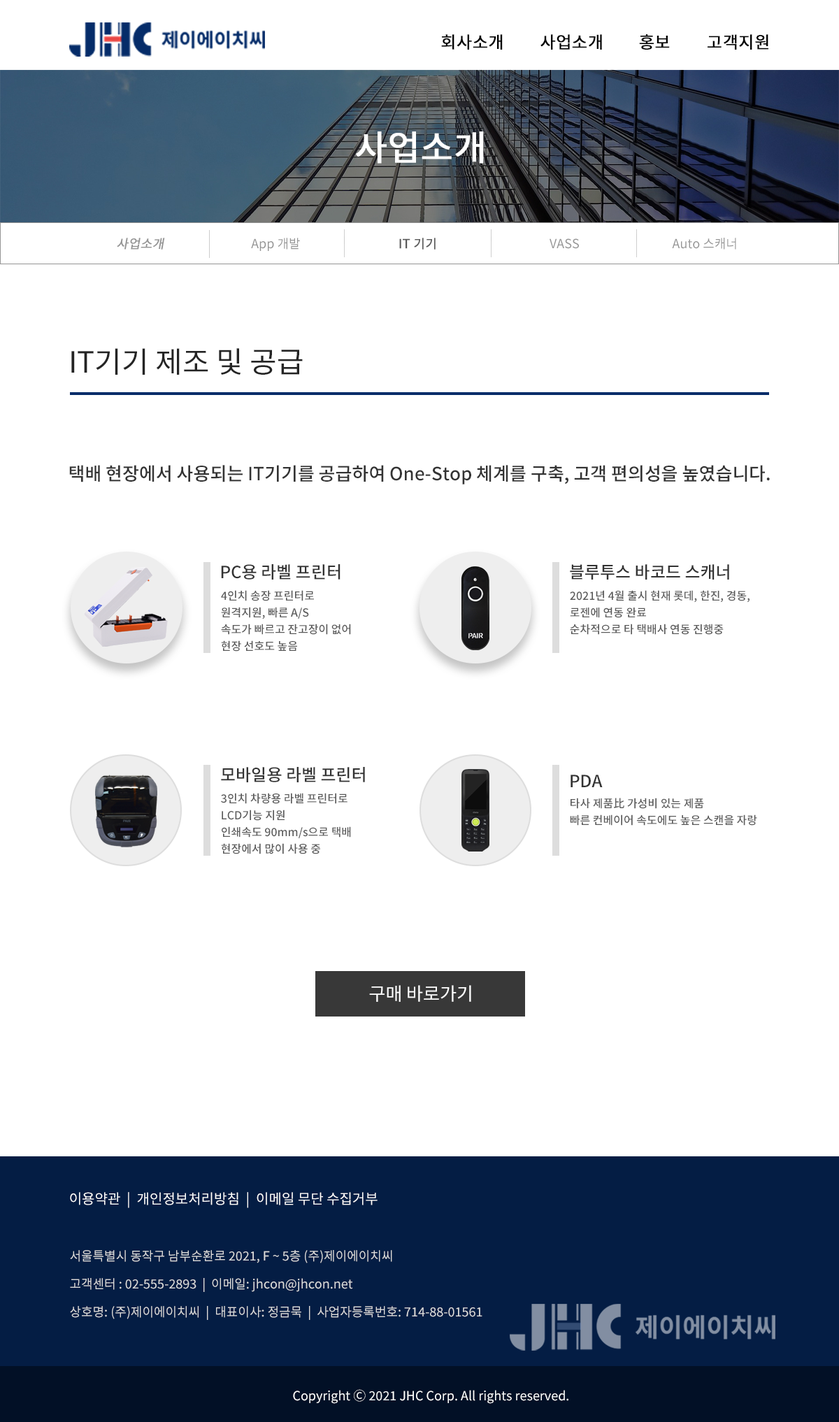
<style>
.page{position:relative;width:839px;height:1422px;background:#ffffff}
.page>*{position:absolute;margin:0}
.t1{font:16.8px "NotoSansKR-Regular";color:#000000;font-weight:bold}
.t2{font:34.9px "NotoSansKR-Regular";color:#ffffff;font-weight:bold}
.t3{font:12.6px "NotoSansKR-Regular";color:#959595;font-weight:bold;font-style:italic}
.t4{font:12.6px "NotoSansKR-Regular";color:#959595}
.t5{font:12.6px "NotoSansKR-Regular";color:#595959;font-weight:bold}
.t6{font:29.4px "NotoSansKR-Regular";color:#242424}
.t7{font:18.2px "NotoSansKR-Medium";color:#333333}
.t8{font:16.8px "NotoSansKR-Medium";color:#333333}
.t9{font:11.2px/16.8px "NotoSansKR-Medium";color:#595959}
.t10{font:18.2px "NotoSansKR-Regular";color:#ffffff}
.t11{font:14px "NotoSansKR-Regular";color:#ffffff}
.t12{font:12.6px/28px "NotoSansKR-Regular";color:#dddddd}
.t13{font:12.6px "NotoSansKR-Regular";color:#ffffff}
</style>
<div class="page">
<p class="t1" style="left:441px;top:34px;width:62px;height:16px">회사소개</p>
<p class="t1" style="left:540px;top:34px;width:62px;height:16px">사업소개</p>
<p class="t1" style="left:639px;top:34px;width:31px;height:16px">홍보</p>
<p class="t1" style="left:707px;top:34px;width:61px;height:16px">고객지원</p>
<p class="t2" style="left:356px;top:131px;width:128px;height:33px">사업소개</p>
<p class="t3" style="left:117px;top:238px;width:48px;height:12px">사업소개</p>
<p class="t4" style="left:251px;top:238px;width:49px;height:13px">App 개발</p>
<p class="t5" style="left:399px;top:238px;width:36px;height:12px">IT 기기</p>
<p class="t4" style="left:549px;top:238px;width:30px;height:11px">VASS</p>
<p class="t4" style="left:672px;top:238px;width:64px;height:12px">Auto 스캐너</p>
<p class="t6" style="left:71px;top:348px;width:232px;height:27px">IT기기 제조 및 공급</p>
<p class="t7" style="left:69px;top:465px;width:701px;height:19px">택배 현장에서 사용되는 IT기기를 공급하여 One-Stop 체계를 구축, 고객 편의성을 높였습니다.</p>
<p class="t8" style="left:221px;top:564px;width:119px;height:15px">PC용 라벨 프린터</p>
<p class="t8" style="left:570px;top:564px;width:159px;height:15px">블루투스 바코드 스캐너</p>
<p class="t9" style="left:221px;top:590px;width:130px;height:61px">4인치 송장 프린터로 <br>원격지원, 빠른 A/S<br>속도가 빠르고 잔고장이 없어 <br>현장 선호도 높음</p>
<p class="t9" style="left:570px;top:590px;width:179px;height:45px">2021년 4월 출시 현재 롯데, 한진, 경동, <br>로젠에 연동 완료 <br>순차적으로 타 택배사 연동 진행중</p>
<p class="t8" style="left:221px;top:767px;width:144px;height:15px">모바일용 라벨 프린터</p>
<p class="t8" style="left:570px;top:774px;width:33px;height:13px">PDA</p>
<p class="t9" style="left:221px;top:793px;width:130px;height:61px">3인치 차량용 라벨 프린터로<br>LCD기능 지원<br>인쇄속도 90mm/s으로 택배<br>현장에서 많이 사용 중</p>
<p class="t9" style="left:570px;top:798px;width:187px;height:27px">타사 제품比 가성비 있는 제품<br>빠른 컨베이어 속도에도 높은 스캔을 자랑</p>
<p class="t10" style="left:369px;top:985px;width:102px;height:17px">구매 바로가기</p>
<p class="t11" style="left:70px;top:1192px;width:307px;height:16px">이용약관  |  개인정보처리방침  |  이메일 무단 수집거부</p>
<p class="t12" style="left:70px;top:1250px;width:412px;height:70px">서울특별시 동작구 남부순환로 2021, F ~ 5층 (주)제이에이치씨<br>고객센터 : 02-555-2893  |  이메일: jhcon@jhcon.net<br>상호명: (주)제이에이치씨  |  대표이사: 정금묵  |  사업자등록번호: 714-88-01561</p>
<p class="t13" style="left:293px;top:1389px;width:275px;height:15px">Copyright Ⓒ 2021 JHC Corp. All rights reserved.</p>
</div>
